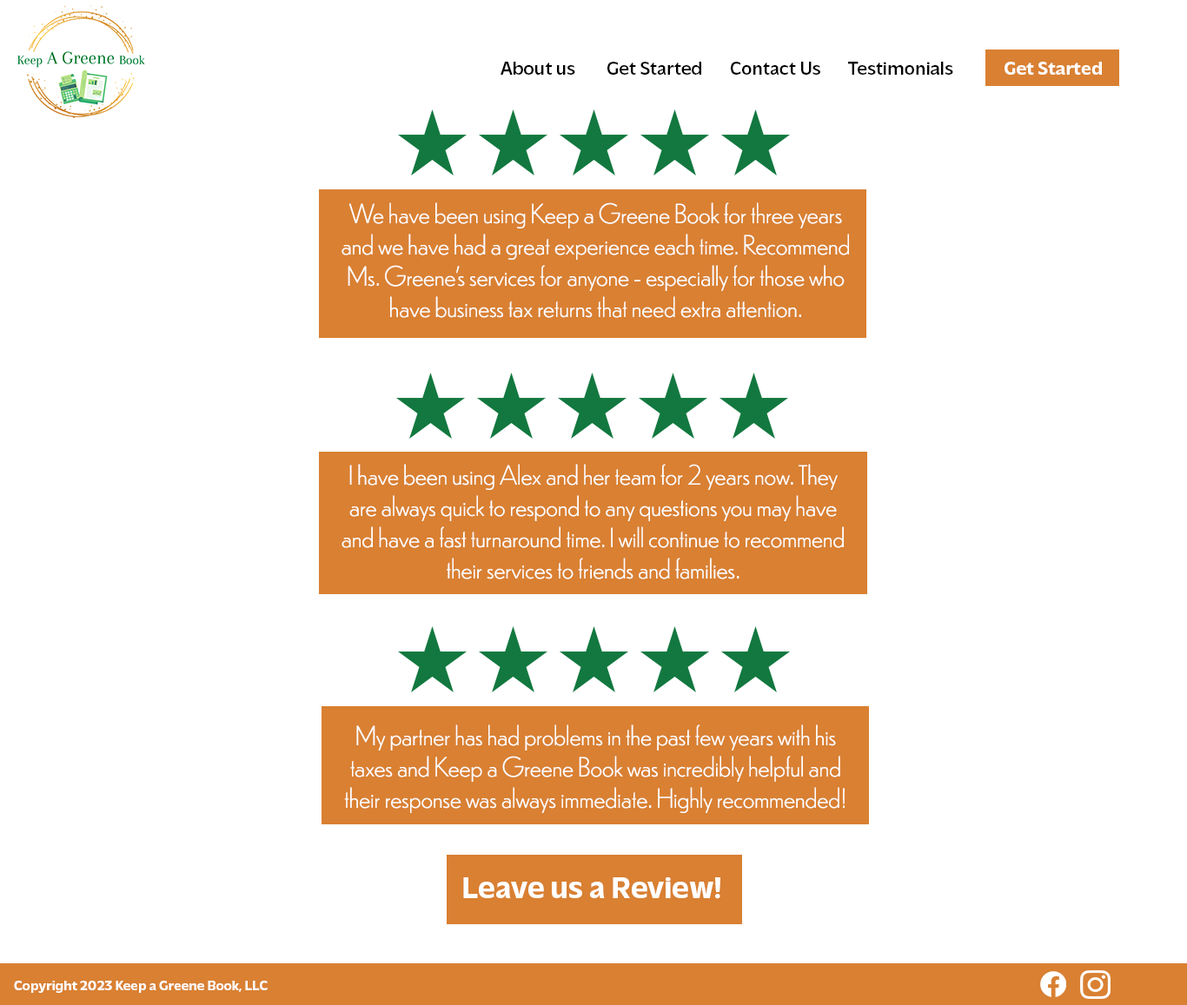
<style>
.page{position:relative;width:1187px;height:1005px;background:#ffffff}
.page>*{position:absolute;margin:0}
.t1{font:19.1px "Massilia-Regular";color:#010101}
.t2{font:19.1px "Massilia-Bold";color:#ffffff}
.t3{font:26.1px "DunbarLow-Light";color:#fefefe}
.t4{font:26.1px "DunbarLow-Light";color:#fefffe}
.t5{font:31.3px "Massilia-Bold";color:#ffffff}
.t6{font:13.9px "Massilia-Bold";color:#ffffff}
</style>
<div class="page">
<p class="t1" style="left:500px;top:62px;width:453px;height:13px">About us        Get Started       Contact Us       Testimonials</p>
<p class="t2" style="left:1004px;top:62px;width:97px;height:13px">Get Started</p>
<p class="t3" style="left:341px;top:202px;width:508px;height:116px;text-align:center">We have been using Keep a Greene Book for three years and we have had a great experience each time. Recommend Ms. Greene’s services for anyone - especially for those who have business tax returns that need extra attention.</p>
<p class="t4" style="left:341px;top:464px;width:502px;height:115px;text-align:center">I have been using Alex and her team for 2 years now. They are always quick to respond to any questions you may have and have a fast turnaround time. I will continue to recommend their services to friends and families.</p>
<p class="t3" style="left:344px;top:724px;width:500px;height:89px;text-align:center">My partner has had problems in the past few years with his taxes and Keep a Greene Book was incredibly helpful and their response was always immediate. Highly recommended!</p>
<p class="t5" style="left:463px;top:877px;width:257px;height:22px">Leave us a Review!</p>
<p class="t6" style="left:14px;top:981px;width:254px;height:12px">Copyright 2023 Keep a Greene Book, LLC</p>
</div>
